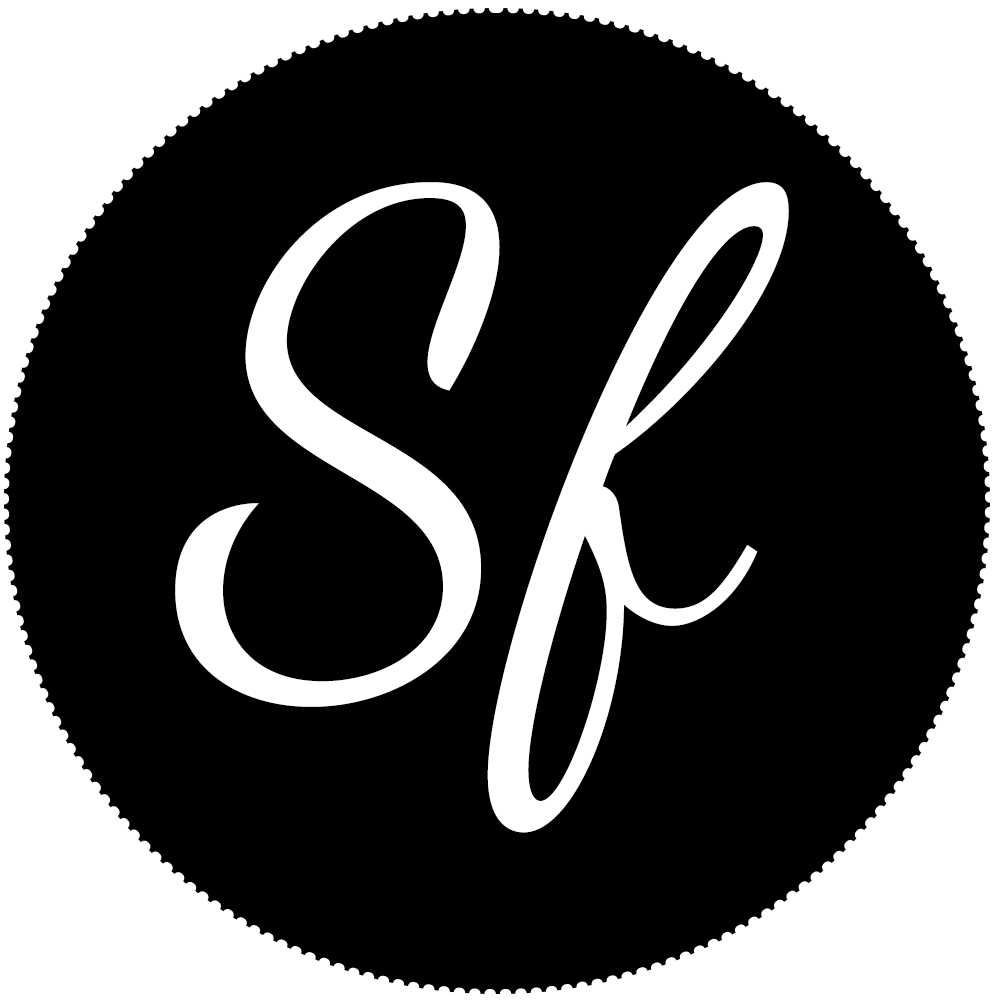
<style>
.page{position:relative;width:1000px;height:1000px;background:#000000}
.page>*{position:absolute;margin:0}
.t1{font:650px "DancingScriptOT";color:#ffffff}
</style>
<div class="page">
<p class="t1" style="left:175px;top:182px;width:614px;height:651px">Sf</p>
</div>
